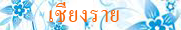
<style>
.page{position:relative;width:181px;height:30px}
.page>*{position:absolute;margin:0}
.t1{font:30px "AngsanaUPC";letter-spacing:0.025em;color:#f96308}
</style>
<div class="page">
<p class="t1" style="left:49px;top:2px;width:70px;height:20px">เชียงราย</p>
</div>
